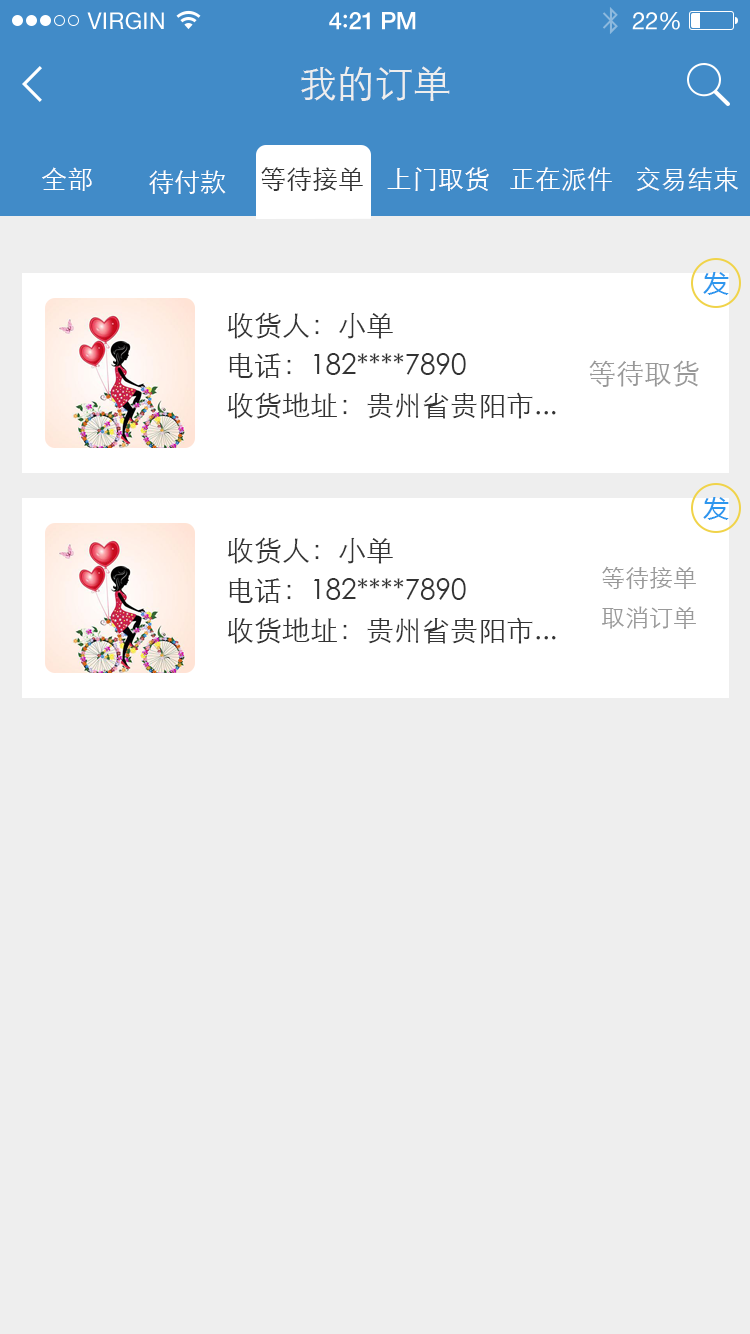
<style>
.page{position:relative;width:750px;height:1334px;background:#eeeeee}
.page>*{position:absolute;margin:0}
.t1{font:23px "HelveticaNeue";letter-spacing:0.02em;color:#ffffff}
.t2{font:24px "HelveticaNeue-Medium";letter-spacing:-0.02em;color:#ffffff}
.t3{font:26px "Avenir-Medium";letter-spacing:-0.02em;color:#ffffff}
.t4{font:24px "HelveticaNeue";letter-spacing:-0.02em;color:#ffffff}
.t5{font:38px "STXihei";color:#eeeeee}
.t6{font:26px "STXihei";color:#ffffff}
.t7{font:26px "STXihei";color:#333333}
.t8{font:26px "MicrosoftYaHei";color:#2e97ee}
.t9{font:28px/40px "STXihei";color:#333333}
.t10{font:28px "STXihei";color:#999999}
.t11{font:24px/40px "STXihei";color:#999999}
</style>
<div class="page">
<p class="t1" style="left:87px;top:12px;width:77px;height:18px">VIRGIN</p>
<p class="t2" style="left:329px;top:12px;width:87px;height:18px">4<span class="t3">:</span>21 PM</p>
<p class="t4" style="left:632px;top:12px;width:48px;height:18px">22%</p>
<p class="t5" style="left:301px;top:66px;width:149px;height:35px">我的订单</p>
<p class="t6" style="left:42px;top:167px;width:50px;height:24px">全部</p>
<p class="t6" style="left:149px;top:170px;width:77px;height:24px">待付款</p>
<p class="t7" style="left:261px;top:167px;width:102px;height:24px">等待接单</p>
<p class="t6" style="left:387px;top:167px;width:102px;height:24px">上门取货</p>
<p class="t6" style="left:510px;top:167px;width:102px;height:24px">正在派件</p>
<p class="t6" style="left:636px;top:167px;width:102px;height:25px">交易结束</p>
<p class="t8" style="left:703px;top:272px;width:26px;height:23px">发</p>
<p class="t9" style="left:227px;top:312px;width:329px;height:107px">收货人：小单<br>电话：182****7890<br>收货地址：贵州省贵阳市...</p>
<p class="t10" style="left:589px;top:360px;width:110px;height:27px">等待取货</p>
<p class="t8" style="left:703px;top:497px;width:26px;height:23px">发</p>
<p class="t9" style="left:227px;top:537px;width:329px;height:107px">收货人：小单<br>电话：182****7890<br>收货地址：贵州省贵阳市...</p>
<p class="t11" style="left:602px;top:566px;width:94px;height:63px">等待接单<br>取消订单</p>
</div>
